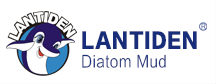
<style>
.page{position:relative;width:216px;height:84px;background:#ffffff}
.page>*{position:absolute;margin:0}
.t1{font:20.2px "FZLTTHJW--GB1-0";letter-spacing:0.04em;color:#192e7a;font-weight:bold;scale:0.87 1}
.t2{font:16.3px "FZLTXHK--GBK1-0";letter-spacing:0.04em;color:#192e7a;scale:0.85 1}
</style>
<div class="page">
<p class="t1" style="left:82px;top:31px;width:115px;height:18px">LANTIDEN</p>
<p class="t2" style="left:82px;top:54px;width:84px;height:14px">Diatom Mud</p>
</div>
